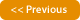
<style>
.page{position:relative;width:80px;height:20px;background:#e68d00}
.page>*{position:absolute;margin:0}
.t1{font:11px "MyriadPro-Semibold";color:#ffffff}
</style>
<div class="page">
<p class="t1" style="left:11px;top:5px;width:56px;height:8px">&lt;&lt; Previous</p>
</div>
